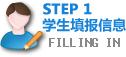
<style>
.page{position:relative;width:126px;height:57px;background:#ffffff}
.page>*{position:absolute;margin:0}
.t1{font:14px/16px "MicrosoftYaHei-Bold";color:#1683d9;font-weight:bold}
.t2{font:14px/16px "MicrosoftYaHei-Bold";color:#1683d9}
.t3{font:14px "Fixedsys";letter-spacing:-0.06em;color:#8a8a8a}
</style>
<div class="page">
<p class="t1" style="left:42px;top:3px;width:84px;height:29px">STEP 1<br><span class="t2"> 学生填报信息</span></p>
<p class="t3" style="left:49px;top:38px;width:71px;height:9px">FILLING IN</p>
</div>
